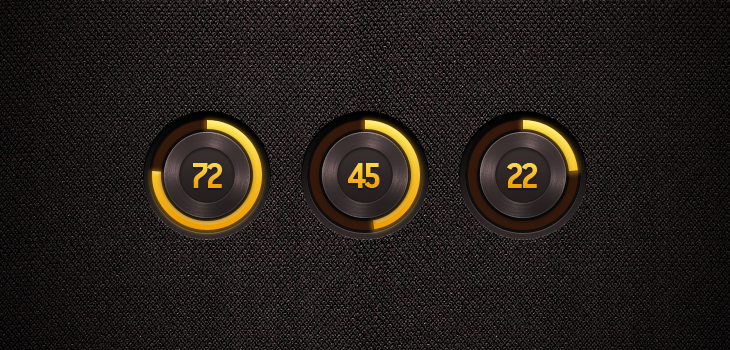
<style>
.page{position:relative;width:730px;height:350px}
.page>*{position:absolute;margin:0}
.t1{font:39px "PFPremierBold";letter-spacing:-0.12em;text-transform:uppercase}
</style>
<div class="page">
<p class="t1" style="left:193px;top:163px;width:29px;height:25px">72</p>
<p class="t1" style="left:348px;top:163px;width:32px;height:25px">45</p>
<p class="t1" style="left:507px;top:163px;width:30px;height:25px">22</p>
</div>
